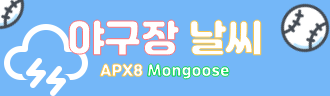
<style>
.page{position:relative;width:330px;height:96px;background:#74b7f8}
.page>*{position:absolute;margin:0}
.t1{font:37px "Jalnan";color:#ffffff}
.t2{font:15px "Jalnan"}
</style>
<div class="page">
<p class="t1" style="left:68px;top:19px;width:194px;height:37px">야구장 날씨</p>
<p class="t2" style="left:99px;top:62px;width:131px;height:18px">APX8 Mongoose</p>
</div>
